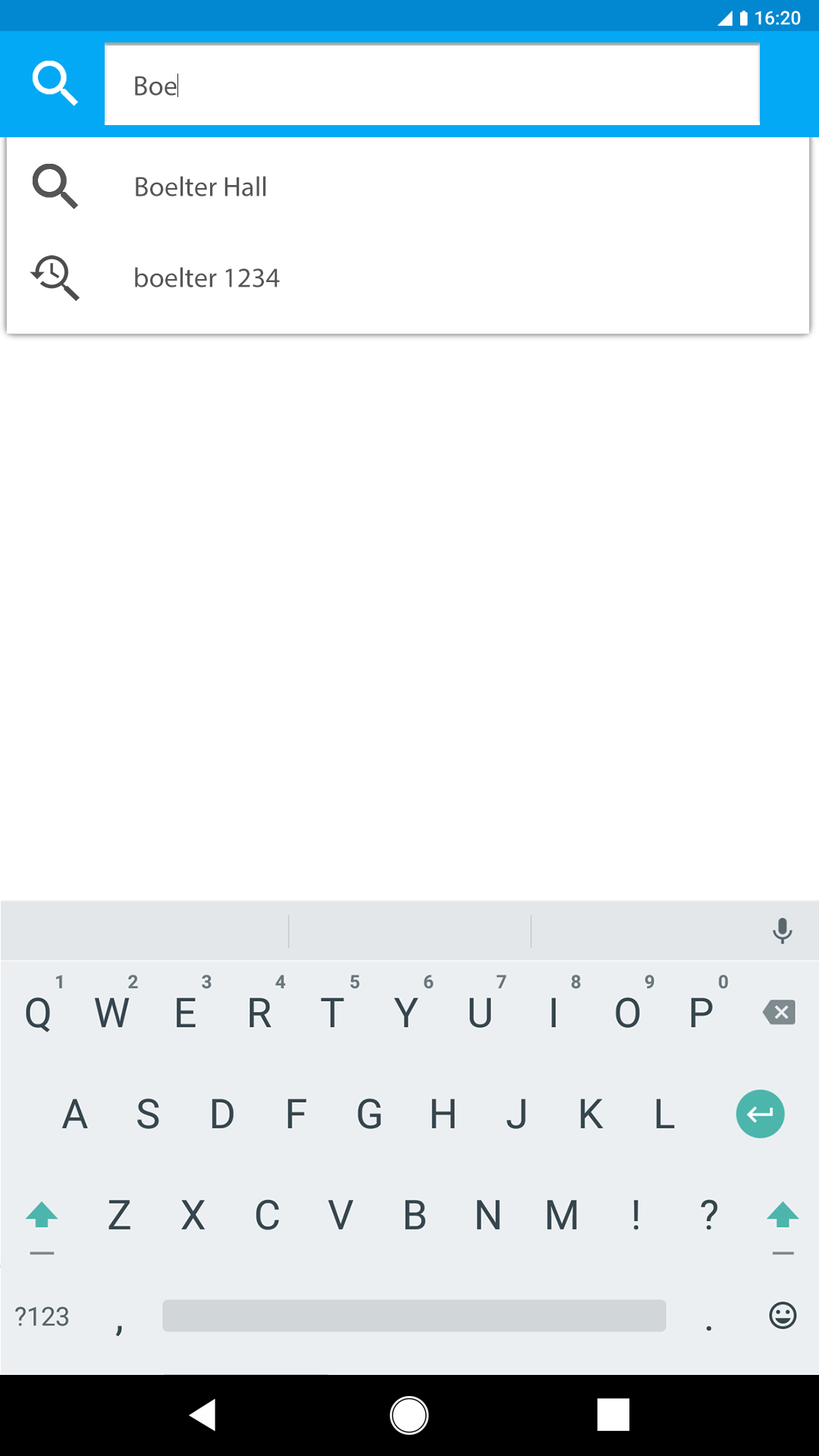
<style>
.page{position:relative;width:819px;height:1456px;background:#ffffff}
.page>*{position:absolute;margin:0}
.t1{font:27.9px "MyriadPro-Regular";color:#555555}
</style>
<div class="page">
<p class="t1" style="left:135px;top:76px;width:42px;height:20px">Boe</p>
<p class="t1" style="left:136px;top:176px;width:130px;height:20px">Boelter Hall</p>
<p class="t1" style="left:135px;top:267px;width:145px;height:20px">boelter 1234</p>
</div>
